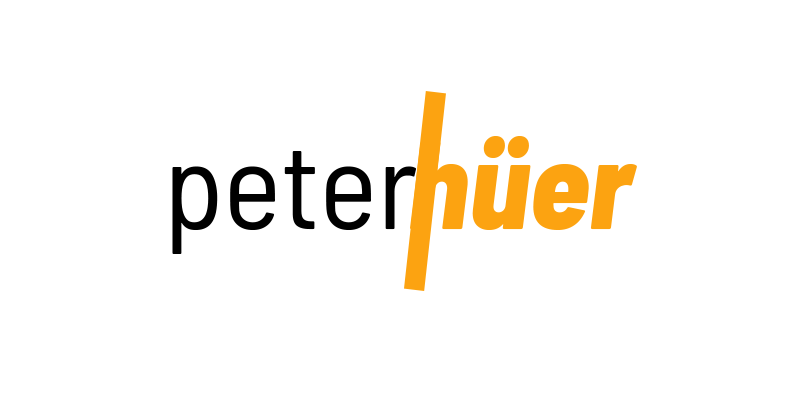
<style>
.page{position:relative;width:800px;height:400px;background:#ffffff}
.page>*{position:absolute;margin:0}
.t1{font:124px "BarlowSemiCondensed-ExtraBoldItalic";color:#fca311}
.t2{font:124px "BarlowSemiCondensed-Regular";color:#000000}
</style>
<div class="page">
<p class="t1" style="left:410px;top:136px;width:227px;height:94px">hüer</p>
<p class="t2" style="left:172px;top:151px;width:244px;height:103px">peter</p>
</div>
